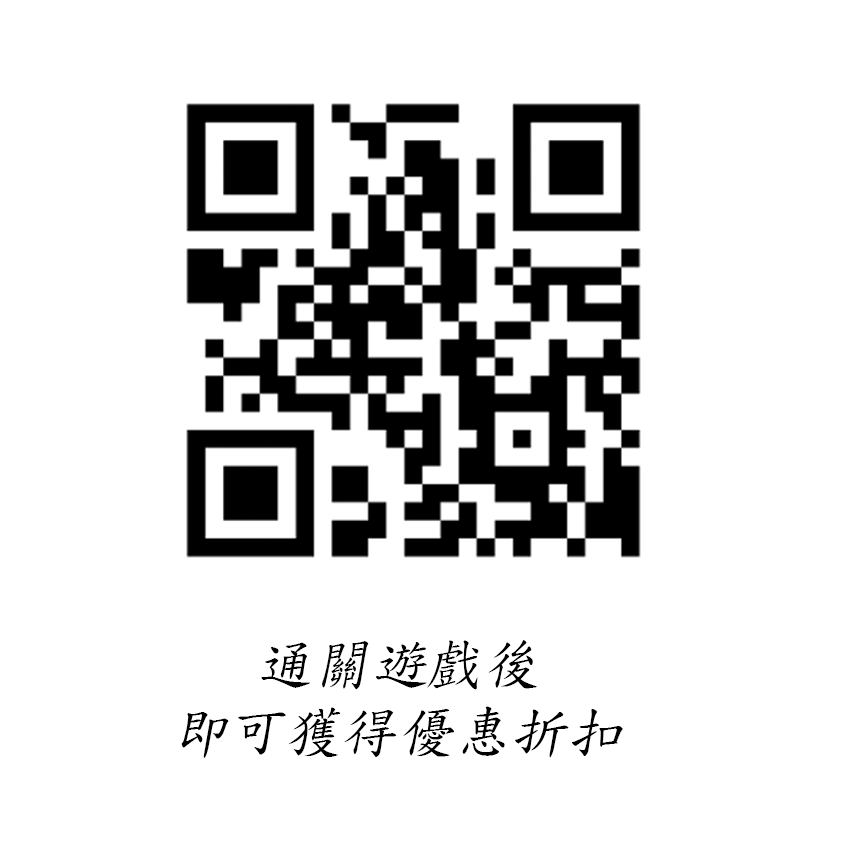
<style>
.page{position:relative;width:850px;height:850px;background:#ffffff}
.page>*{position:absolute;margin:0}
.t1{font:56px/68px "DFKaiShu-SB-Estd-BF";letter-spacing:0.01em;color:#000000;font-style:italic}
</style>
<div class="page">
<p class="t1" style="left:181px;top:640px;width:442px;height:118px;text-align:center">通關遊戲後<br>即可獲得優惠折扣</p>
</div>
